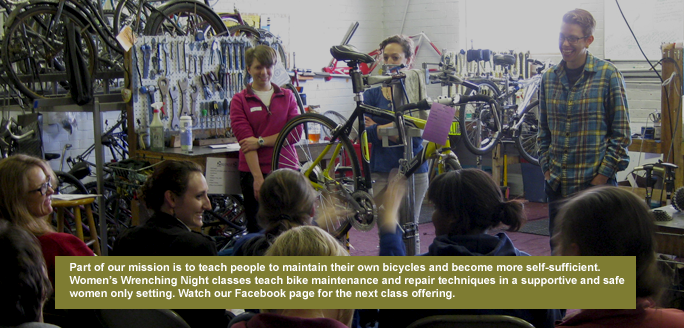
<style>
.page{position:relative;width:684px;height:328px}
.page>*{position:absolute;margin:0}
.t1{font:11px "Arial-BoldMT";color:#ffffff}
</style>
<div class="page">
<p class="t1" style="left:69px;top:263px;width:556px;height:37px">Part of our mission is to teach people to maintain their own bicycles and become more self-sufficient.<br>Women’s Wrenching Night classes teach bike maintenance and repair techniques in a supportive and safe<br>women only setting. Watch our Facebook page for the next class offering.</p>
</div>
